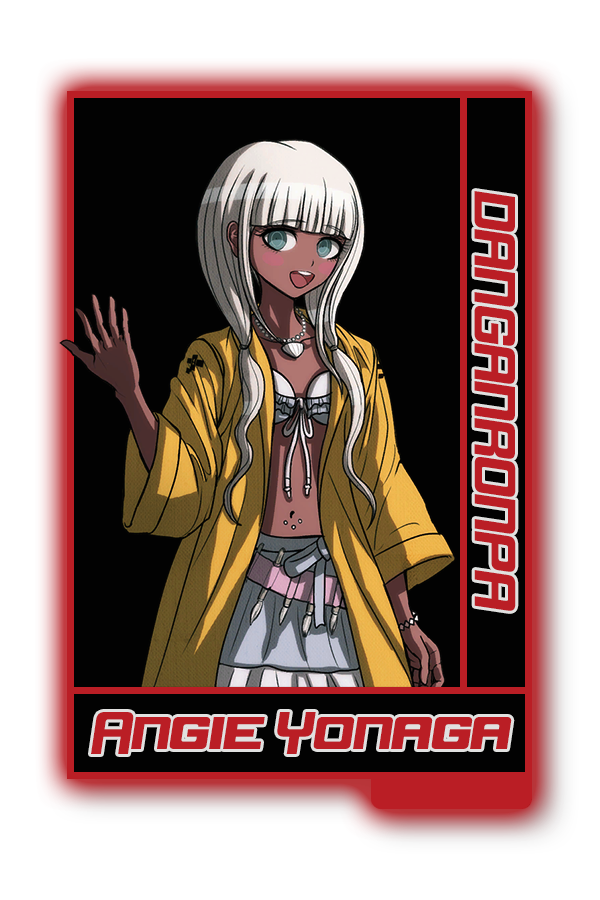
<style>
.page{position:relative;width:600px;height:900px;background:#020202}
.page>*{position:absolute;margin:0}
.t1{font:48.8px "DorBlue";color:#bb2c2e}
.t2{font:50.5px "DorBlue";color:#bb2c2e}
</style>
<div class="page">
<p class="t1" style="left:474px;top:191px;width:42px;height:420px;rotate:90deg">DANGANRONPA</p>
<p class="t2" style="left:91px;top:712px;width:421px;height:42px">Angie Yonaga</p>
</div>
